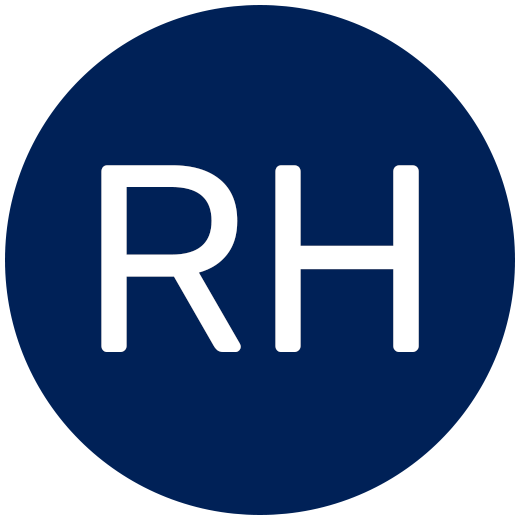
<style>
.page{position:relative;width:520px;height:520px;background:#002157}
.page>*{position:absolute;margin:0}
.t1{font:266.7px "Rubik-Regular";color:#ffffff}
</style>
<div class="page">
<p class="t1" style="left:101px;top:165px;width:318px;height:187px">RH</p>
</div>
